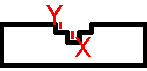
<style>
.page{position:relative;width:147px;height:71px;background:#ffffff}
.page>*{position:absolute;margin:0}
.t1{font:28px "Tahoma";color:#ff0000}
</style>
<div class="page">
<p class="t1" style="left:46px;top:5px;width:17px;height:20px">Y</p>
<p class="t1" style="left:75px;top:37px;width:16px;height:20px">X</p>
</div>
